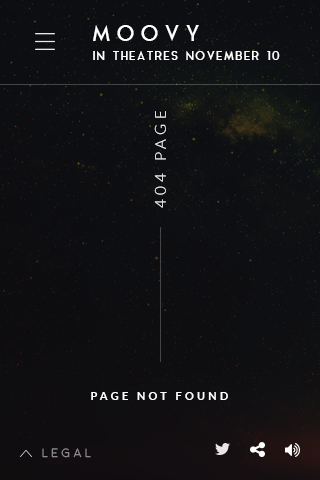
<style>
.page{position:relative;width:320px;height:480px}
.page>*{position:absolute;margin:0}
.t1{font:22px "AquaGrotesque";letter-spacing:0.2em;color:#ffffff;text-transform:uppercase}
.t2{font:12px "AquaGrotesque";letter-spacing:0.05em;color:#ffffff;text-transform:uppercase}
.t3{font:15px "Lato-Light";letter-spacing:0.3em;text-transform:uppercase}
.t4{font:11px "Lato-Bold";letter-spacing:0.3em;color:#ffffff;text-transform:uppercase}
.t5{font:12px "Moon-Light";letter-spacing:0.3em;text-transform:uppercase}
</style>
<div class="page">
<p class="t1" style="left:93px;top:25px;width:106px;height:16px">moovy</p>
<p class="t2" style="left:93px;top:51px;width:187px;height:9px">IN THEATRES NoveMBER 10</p>
<p class="t3" style="left:154px;top:111px;width:12px;height:97px;rotate:-90deg">404 page</p>
<p class="t4" style="left:91px;top:392px;width:137px;height:8px">page not found</p>
<p class="t5" style="left:42px;top:448px;width:49px;height:10px">legal</p>
</div>
